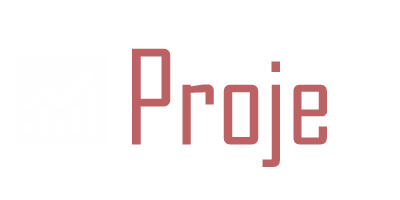
<style>
.page{position:relative;width:400px;height:200px;background:#ffffff}
.page>*{position:absolute;margin:0}
.t1{font:125px "AgencyFB-Reg";color:#bc6265}
.t2{font:125px "AgencyFB-Reg";color:#ffffff}
</style>
<div class="page">
<p class="t1" style="left:132px;top:48px;width:247px;height:119px">Proje<span class="t2">X</span></p>
</div>
